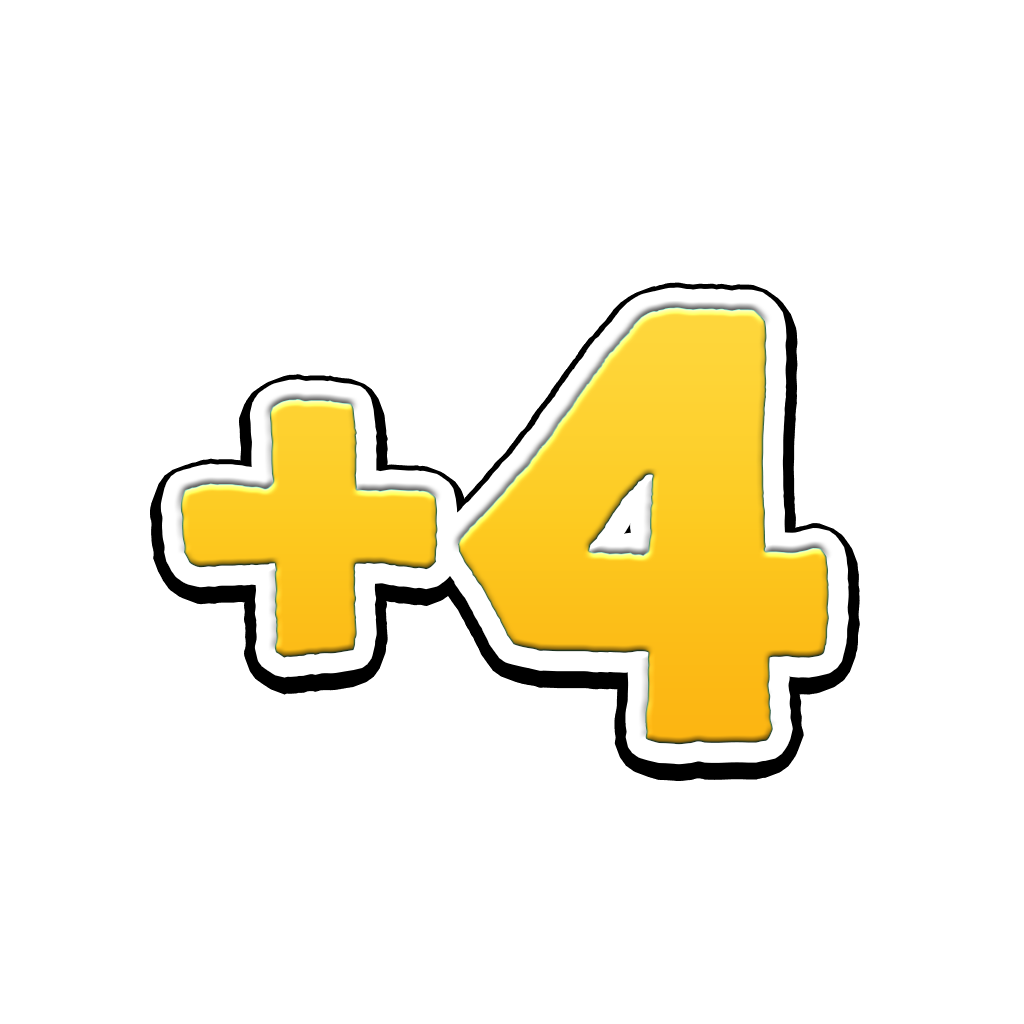
<style>
.page{position:relative;width:1024px;height:1024px;background:#ffffff}
.page>*{position:absolute;margin:0}
.t1{font:600px "Skranji-Bold";color:#fdca20}
</style>
<div class="page">
<p class="t1" style="left:180px;top:307px;width:649px;height:438px">+4</p>
</div>
